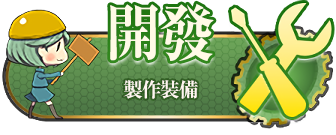
<style>
.page{position:relative;width:336px;height:135px;background:#ffffff}
.page>*{position:absolute;margin:0}
.t1{font:61.6px "RyuminPro-ExBold";color:#fffae7;scale:0.91 1}
.t2{font:20px "RyuminPro-ExBold";letter-spacing:-0.08em;color:#fff6f1}
</style>
<div class="page">
<p class="t1" style="left:110px;top:3px;width:104px;height:58px">開發</p>
<p class="t2" style="left:123px;top:80px;width:75px;height:19px">製作裝備</p>
</div>
